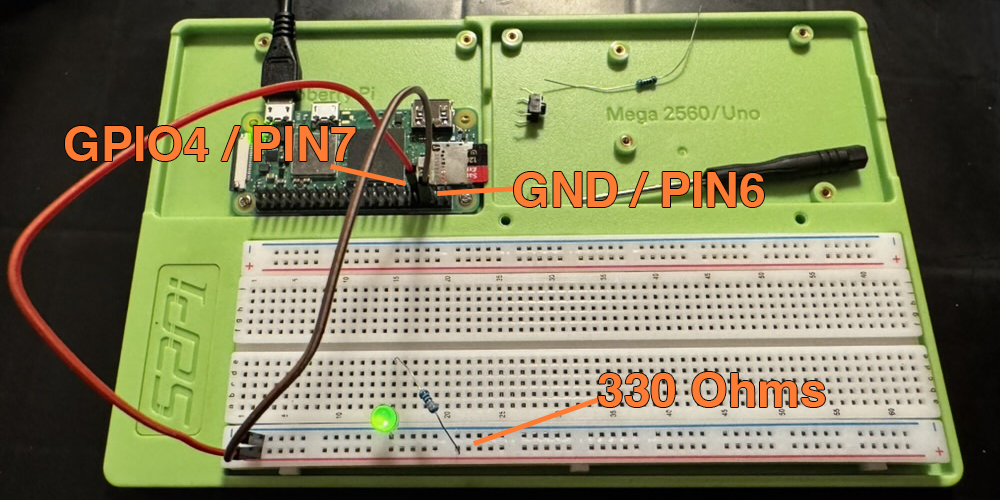
<style>
.page{position:relative;width:1000px;height:500px}
.page>*{position:absolute;margin:0}
.t1{font:48px "Helvetica-Bold";color:#fd7b33}
</style>
<div class="page">
<p class="t1" style="left:65px;top:126px;width:291px;height:35px">GPIO4 / PIN7</p>
<p class="t1" style="left:514px;top:172px;width:250px;height:35px">GND / PIN6</p>
<p class="t1" style="left:598px;top:372px;width:227px;height:35px">330 Ohms</p>
</div>
